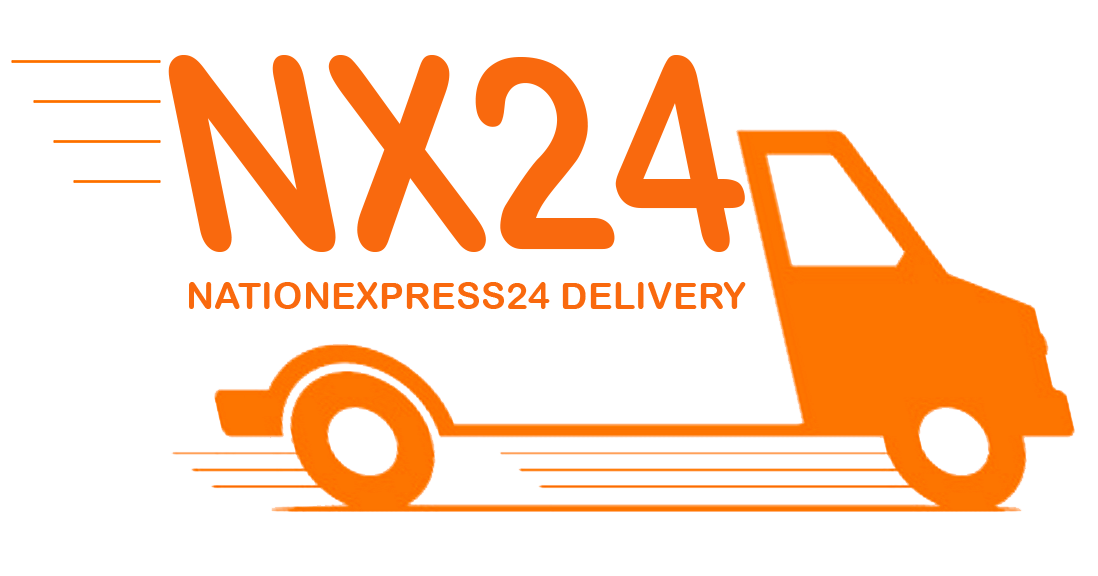
<style>
.page{position:relative;width:1098px;height:576px;background:#ffffff}
.page>*{position:absolute;margin:0}
.t1{font:272.5px "ArialRoundedMTBold";color:#f9690e;scale:0.82 1}
.t2{font:37.5px "ArialRoundedMTBold";color:#f9690e}
</style>
<div class="page">
<p class="t1" style="left:168px;top:55px;width:577px;height:197px">NX24</p>
<p class="t2" style="left:189px;top:282px;width:557px;height:27px">NATIONEXPRESS24 DELIVERY</p>
</div>
